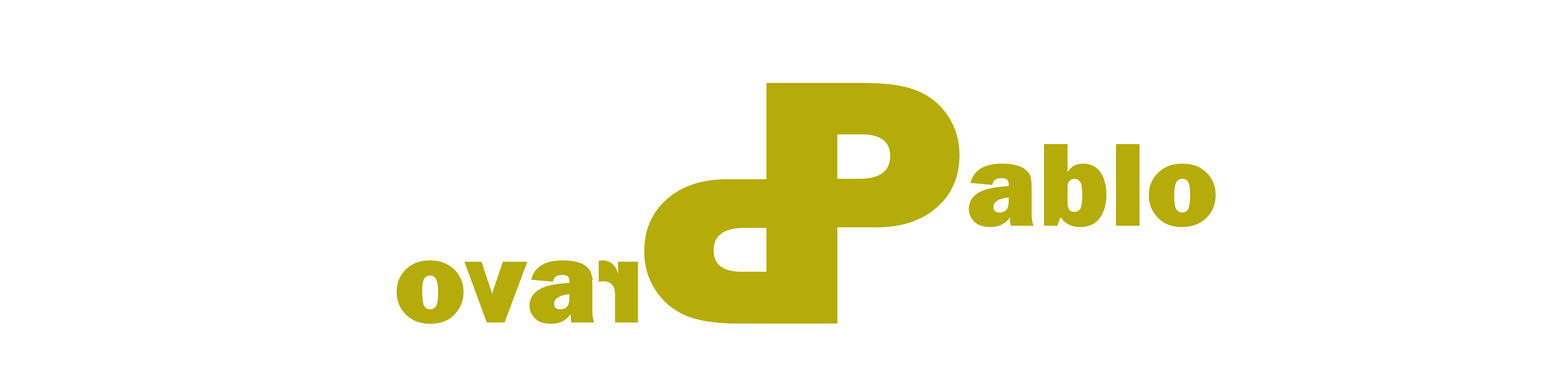
<style>
.page{position:relative;width:1568px;height:390px;background:#ffffff}
.page>*{position:absolute;margin:0}
.t1{font:340.6px "FranklinGothic-Heavy";color:#b5ac09}
.t2{font:122.6px "FranklinGothic-Heavy";color:#b5ac09}
</style>
<div class="page">
<p class="t1" style="left:766px;top:83px;width:194px;height:227px">P</p>
<p class="t1" style="left:644px;top:97px;width:193px;height:227px;rotate:180deg">P</p>
<p class="t2" style="left:969px;top:144px;width:247px;height:83px">ablo</p>
</div>
